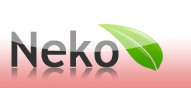
<style>
.page{position:relative;width:191px;height:88px;background:#ffffff}
.page>*{position:absolute;margin:0}
.t1{font:48px "TrebuchetMS";font-weight:bold}
</style>
<div class="page">
<p class="t1" style="left:11px;top:30px;width:108px;height:38px">Neko</p>
</div>
